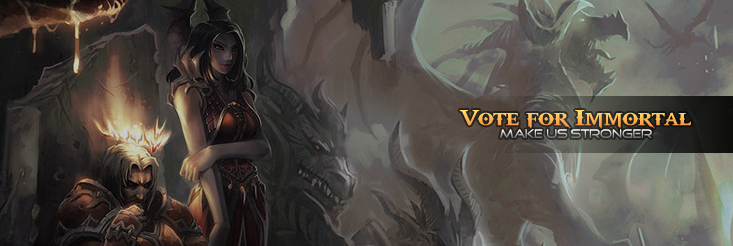
<style>
.page{position:relative;width:733px;height:246px}
.page>*{position:absolute;margin:0}
.t1{font:24px "GodOfWar";letter-spacing:-0.04em}
.t2{font:12px "GoodTimes";letter-spacing:-0.04em}
</style>
<div class="page">
<p class="t1" style="left:459px;top:110px;width:232px;height:19px">Vote for Immortal</p>
<p class="t2" style="left:500px;top:129px;width:152px;height:9px">Make us Stronger</p>
</div>
